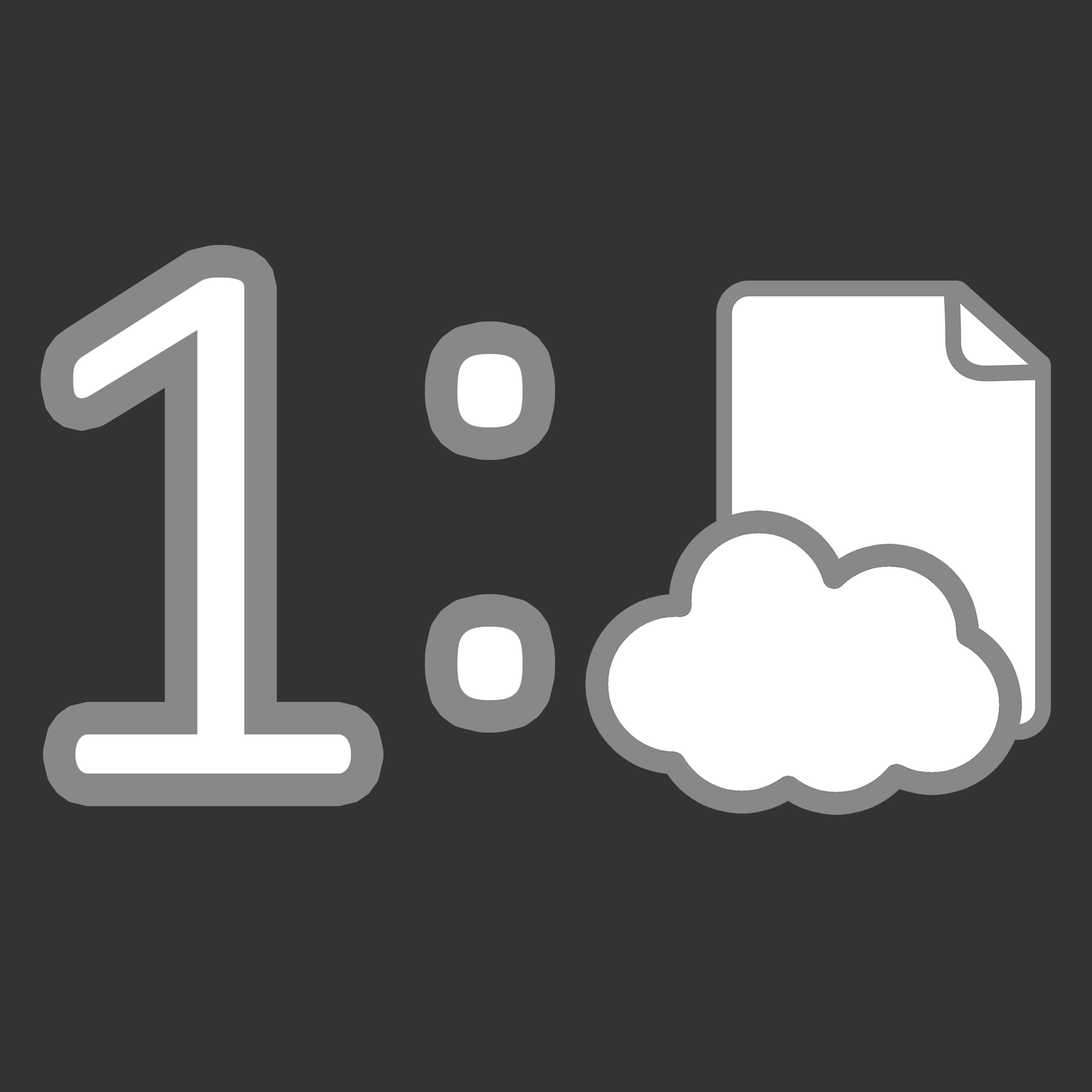
<style>
.page{position:relative;width:1092px;height:1092px;background:#333333}
.page>*{position:absolute;margin:0}
.t1{font:780.2px "Calibri-Light";color:#ffffff}
</style>
<div class="page">
<p class="t1" style="left:73px;top:278px;width:278px;height:496px">1</p>
<p class="t1" style="left:457px;top:354px;width:66px;height:346px">:</p>
</div>
